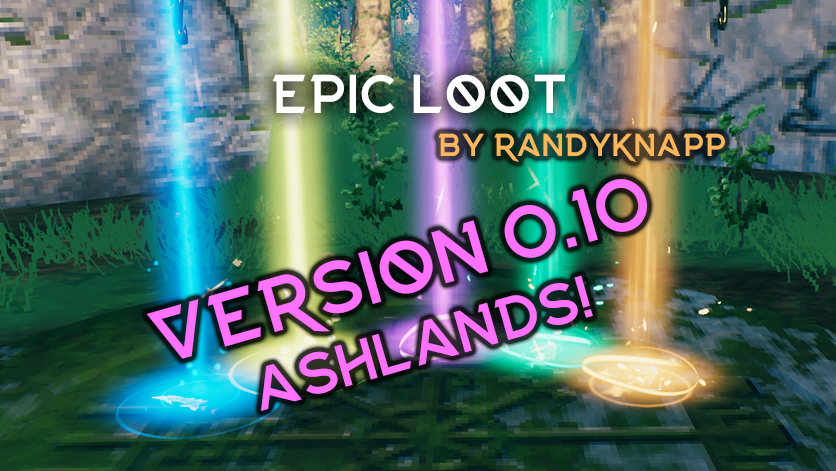
<style>
.page{position:relative;width:836px;height:471px}
.page>*{position:absolute;margin:0}
.t1{font:55px "Njord-Alternate";color:#ffffff}
.t2{font:32px "Njord-Alternate";color:#ffb75b}
.t3{font:76px/91.2px "Njord-Alternate";color:#ff72ff}
.t4{font:60px/72px "Njord-Alternate";color:#ff72ff}
</style>
<div class="page">
<p class="t1" style="left:272px;top:74px;width:293px;height:39px">Epic Loot</p>
<p class="t2" style="left:438px;top:133px;width:287px;height:29px">by RandyKnapp</p>
<p class="t3" style="left:146px;top:179px;width:501px;height:232px;text-align:center;rotate:-16deg">Version 0.10<br><span class="t4">ASHLANDS!</span></p>
</div>
